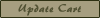
<style>
.page{position:relative;width:100px;height:18px;background:#a69e80}
.page>*{position:absolute;margin:0}
.t1{font:11px "Brush445BT-Regular";letter-spacing:0.05em;color:#515133}
</style>
<div class="page">
<p class="t1" style="left:18px;top:4px;width:63px;height:12px">Update Cart</p>
</div>
